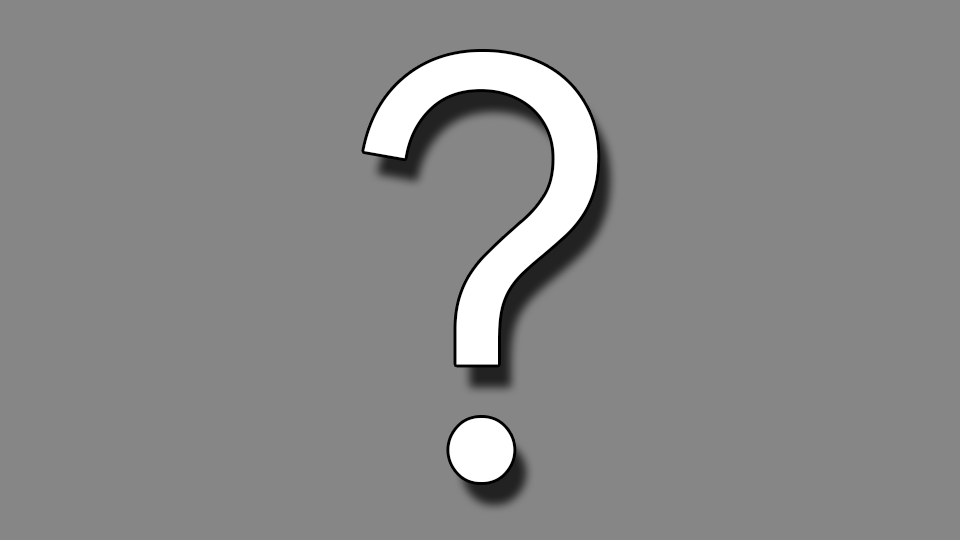
<style>
.page{position:relative;width:960px;height:540px;background:#868686}
.page>*{position:absolute;margin:0}
.t1{font:591.3px "AvenirNext-Regular";color:#ffffff}
</style>
<div class="page">
<p class="t1" style="left:364px;top:52px;width:234px;height:430px">?</p>
</div>
